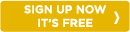
<style>
.page{position:relative;width:130px;height:32px;background:#e5b500}
.page>*{position:absolute;margin:0}
.t1{font:10.9px/13.6px "Gotham-Medium";color:#ffffff;text-transform:uppercase;font-weight:bold}
</style>
<div class="page">
<p class="t1" style="left:24px;top:5px;width:82px;height:22px;text-align:center">Sign Up Now<br>It’s Free</p>
</div>
